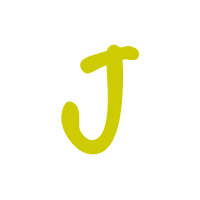
<style>
.page{position:relative;width:200px;height:200px;background:#ffffff}
.page>*{position:absolute;margin:0}
.t1{font:126.3px "Noteworthy-Bold";color:#cccc00;font-weight:bold}
</style>
<div class="page">
<p class="t1" style="left:61px;top:44px;width:78px;height:111px">J</p>
</div>
